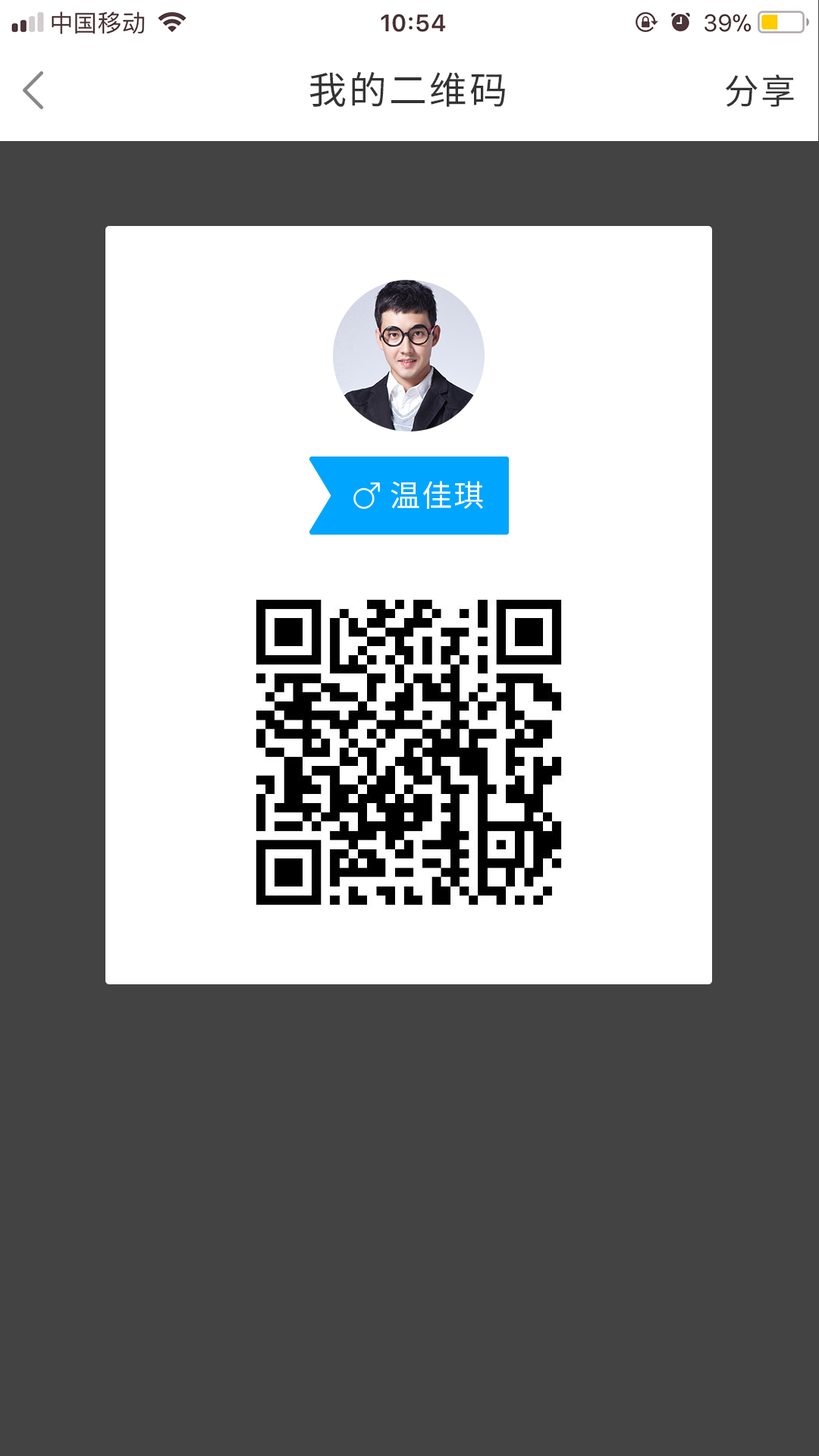
<style>
.page{position:relative;width:819px;height:1456px;background:#434343}
.page>*{position:absolute;margin:0}
.t1{font:37.9px "SourceHanSansCN-Regular";letter-spacing:0.06em;color:#333333}
.t2{font:34.9px "SourceHanSansCN-Regular";letter-spacing:0.06em;color:#333333}
.t3{font:30.3px "SourceHanSansCN-Regular";letter-spacing:0.06em;color:#ffffff}
</style>
<div class="page">
<p class="t1" style="left:309px;top:72px;width:196px;height:35px">我的二维码</p>
<p class="t2" style="left:725px;top:74px;width:69px;height:33px">分享</p>
<p class="t3" style="left:391px;top:481px;width:92px;height:28px">温佳琪</p>
</div>
